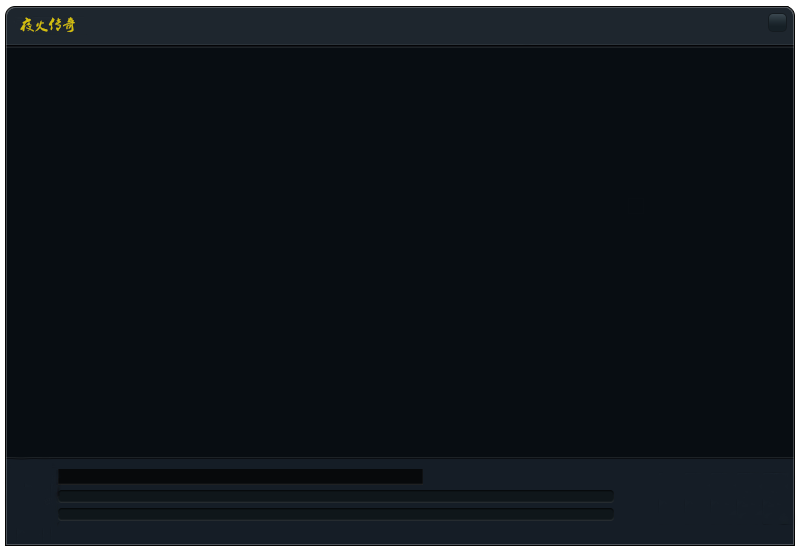
<style>
.page{position:relative;width:800px;height:550px;background:#080d12}
.page>*{position:absolute;margin:0}
.t1{font:14px "2.0-";color:#d4bf0e}
</style>
<div class="page">
<p class="t1" style="left:20px;top:17px;width:55px;height:16px">夜火传奇</p>
</div>
